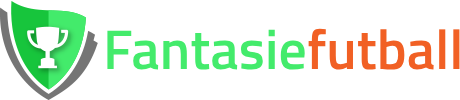
<style>
.page{position:relative;width:460px;height:100px;background:#ffffff}
.page>*{position:absolute;margin:0}
.t1{font:56px "TitilliumWeb-SemiBold";color:#43eb6b}
.t2{font:56px "TitilliumWeb-SemiBold";color:#f16024}
</style>
<div class="page">
<p class="t1" style="left:107px;top:28px;width:353px;height:42px">Fantasie<span class="t2">futball</span></p>
</div>
